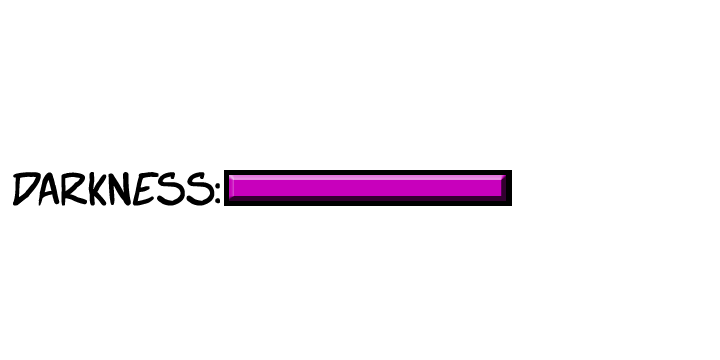
<style>
.page{position:relative;width:720px;height:360px;background:#ffffff}
.page>*{position:absolute;margin:0}
.t1{font:48px "SuperWebcomicBros.";color:#000000}
.t2{font:24px "SuperWebcomicBros.";color:#000000}
</style>
<div class="page">
<p class="t1" style="left:13px;top:172px;width:207px;height:34px"><span class="t2"><br></span>Darkness:</p>
</div>
